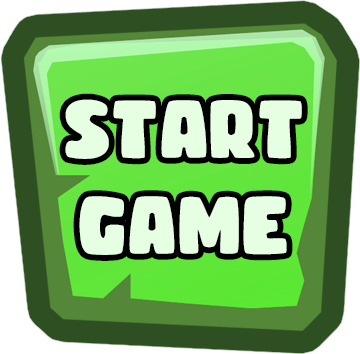
<style>
.page{position:relative;width:360px;height:354px;background:#2e4f21}
.page>*{position:absolute;margin:0}
.t1{font:73px "CHIBOLDdemo";color:#e6ffe3;font-weight:bold}
</style>
<div class="page">
<p class="t1" style="left:65px;top:99px;width:237px;height:60px">start</p>
<p class="t1" style="left:79px;top:196px;width:208px;height:59px">game</p>
</div>
